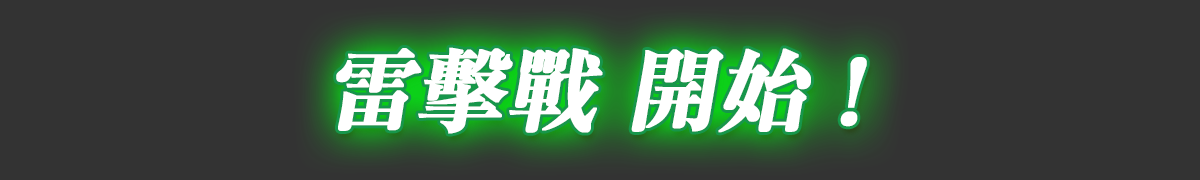
<style>
.page{position:relative;width:1200px;height:180px;background:#333333}
.page>*{position:absolute;margin:0}
.t1{font:90px "RyuminPr6N-ExBold";letter-spacing:-0.025em;color:#ffffff;font-weight:bold;font-style:italic}
</style>
<div class="page">
<p class="t1" style="left:336px;top:47px;width:531px;height:87px">雷擊戰 開始 !</p>
</div>
